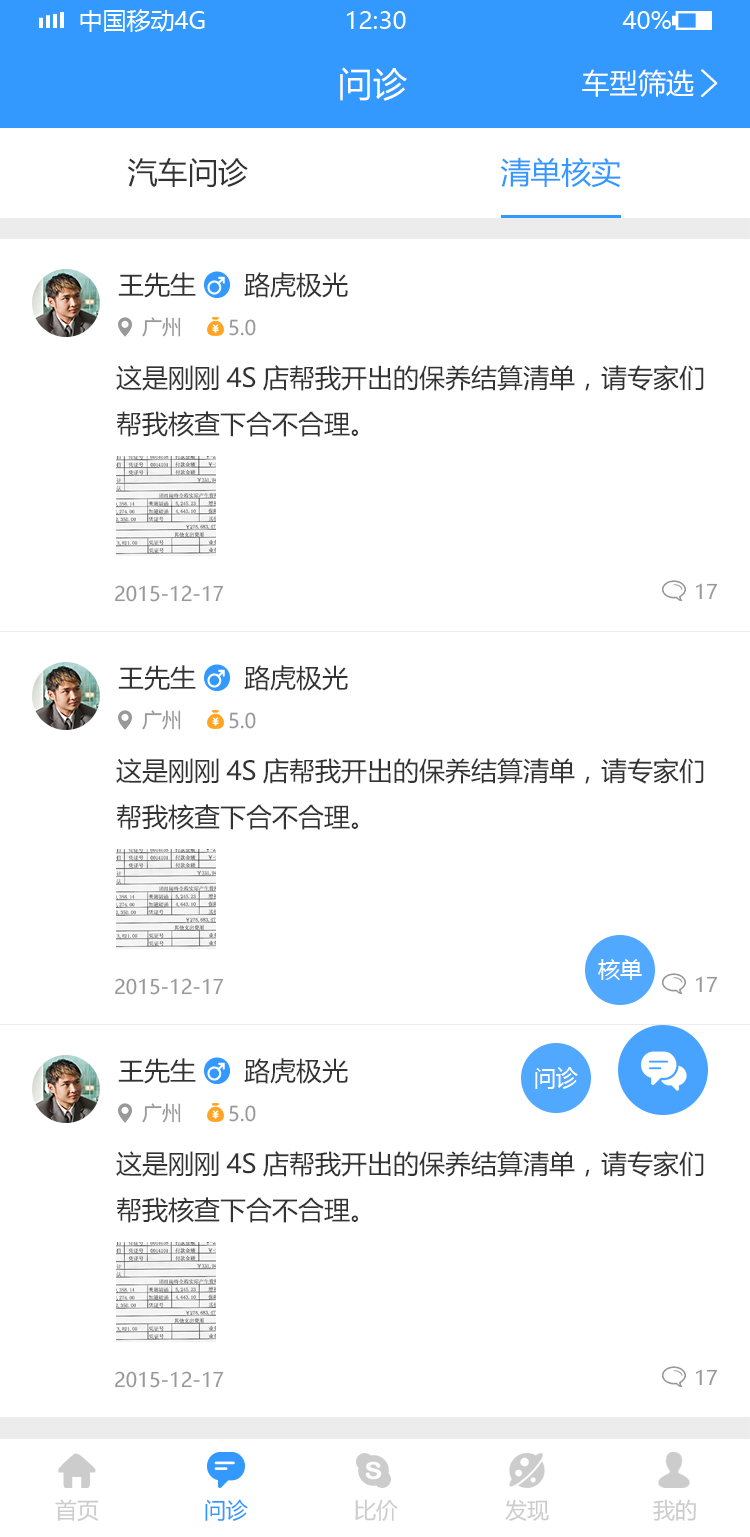
<style>
.page{position:relative;width:750px;height:1537px;background:#ffffff}
.page>*{position:absolute;margin:0}
.t1{font:34px "MicrosoftYaHei";color:#ffffff}
.t2{font:28px "MicrosoftYaHei";color:#ffffff}
.t3{font:30px "MicrosoftYaHei";color:#333333}
.t4{font:30px "MicrosoftYaHei";color:#3399ff}
.t5{font:26px "MicrosoftYaHei";color:#333333}
.t6{font:20px "MicrosoftYaHei";color:#999999}
.t7{font:22px "MicrosoftYaHei";color:#ffffff}
.t8{font:22px "MicrosoftYaHei";color:#cccccc}
.t9{font:22px "MicrosoftYaHei";color:#3399ff}
</style>
<div class="page">
<p class="t1" style="left:340px;top:67px;width:67px;height:34px">问诊</p>
<p class="t2" style="left:582px;top:69px;width:112px;height:28px">车型筛选</p>
<p class="t3" style="left:127px;top:157px;width:121px;height:30px">汽车问诊</p>
<p class="t4" style="left:500px;top:157px;width:121px;height:31px">清单核实</p>
<p class="t5" style="left:118px;top:272px;width:78px;height:26px">王先生</p>
<p class="t5" style="left:118px;top:272px;width:78px;height:26px">王先生</p>
<p class="t5" style="left:244px;top:272px;width:104px;height:26px">路虎极光</p>
<p class="t5" style="left:244px;top:272px;width:104px;height:26px">路虎极光</p>
<p class="t6" style="left:142px;top:317px;width:39px;height:20px">广州</p>
<p class="t6" style="left:142px;top:317px;width:39px;height:20px">广州</p>
<p class="t6" style="left:229px;top:319px;width:27px;height:17px">5.0</p>
<p class="t6" style="left:229px;top:319px;width:27px;height:17px">5.0</p>
<p class="t5" style="left:116px;top:365px;width:588px;height:72px">这是刚刚4S店帮我开出的保养结算清单，请专家们<br>帮我核查下合不合理。</p>
<p class="t6" style="left:115px;top:585px;width:109px;height:17px">2015-12-17</p>
<p class="t6" style="left:115px;top:585px;width:109px;height:17px">2015-12-17</p>
<p class="t6" style="left:696px;top:583px;width:22px;height:17px">17</p>
<p class="t6" style="left:696px;top:583px;width:22px;height:17px">17</p>
<p class="t5" style="left:118px;top:665px;width:78px;height:26px">王先生</p>
<p class="t5" style="left:118px;top:665px;width:78px;height:26px">王先生</p>
<p class="t5" style="left:244px;top:665px;width:104px;height:26px">路虎极光</p>
<p class="t5" style="left:244px;top:665px;width:104px;height:26px">路虎极光</p>
<p class="t6" style="left:142px;top:710px;width:39px;height:20px">广州</p>
<p class="t6" style="left:142px;top:710px;width:39px;height:20px">广州</p>
<p class="t6" style="left:229px;top:712px;width:27px;height:17px">5.0</p>
<p class="t6" style="left:229px;top:712px;width:27px;height:17px">5.0</p>
<p class="t5" style="left:116px;top:758px;width:588px;height:72px">这是刚刚4S店帮我开出的保养结算清单，请专家们<br>帮我核查下合不合理。</p>
<p class="t7" style="left:598px;top:959px;width:44px;height:21px">核单</p>
<p class="t6" style="left:696px;top:976px;width:22px;height:17px">17</p>
<p class="t6" style="left:696px;top:976px;width:22px;height:17px">17</p>
<p class="t6" style="left:115px;top:978px;width:109px;height:17px">2015-12-17</p>
<p class="t6" style="left:115px;top:978px;width:109px;height:17px">2015-12-17</p>
<p class="t5" style="left:118px;top:1058px;width:78px;height:26px">王先生</p>
<p class="t5" style="left:118px;top:1058px;width:78px;height:26px">王先生</p>
<p class="t5" style="left:244px;top:1058px;width:104px;height:26px">路虎极光</p>
<p class="t5" style="left:244px;top:1058px;width:104px;height:26px">路虎极光</p>
<p class="t7" style="left:535px;top:1067px;width:43px;height:22px">问诊</p>
<p class="t6" style="left:142px;top:1103px;width:39px;height:20px">广州</p>
<p class="t6" style="left:142px;top:1103px;width:39px;height:20px">广州</p>
<p class="t6" style="left:229px;top:1105px;width:27px;height:17px">5.0</p>
<p class="t6" style="left:229px;top:1105px;width:27px;height:17px">5.0</p>
<p class="t5" style="left:116px;top:1151px;width:588px;height:72px">这是刚刚4S店帮我开出的保养结算清单，请专家们<br>帮我核查下合不合理。</p>
<p class="t6" style="left:115px;top:1371px;width:109px;height:17px">2015-12-17</p>
<p class="t6" style="left:115px;top:1371px;width:109px;height:17px">2015-12-17</p>
<p class="t6" style="left:696px;top:1369px;width:22px;height:17px">17</p>
<p class="t6" style="left:696px;top:1369px;width:22px;height:17px">17</p>
<p class="t8" style="left:55px;top:1499px;width:44px;height:22px">首页</p>
<p class="t9" style="left:205px;top:1499px;width:43px;height:22px">问诊</p>
<p class="t8" style="left:355px;top:1499px;width:43px;height:22px">比价</p>
<p class="t8" style="left:505px;top:1499px;width:44px;height:22px">发现</p>
<p class="t8" style="left:653px;top:1499px;width:43px;height:22px">我的</p>
</div>
